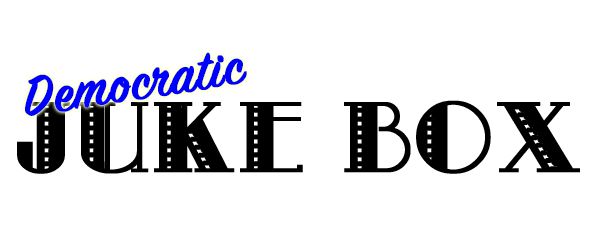
<style>
.page{position:relative;width:600px;height:250px;background:#ffffff}
.page>*{position:absolute;margin:0}
.t1{font:60px "SignPainter-HouseScript";color:#0000ff;font-weight:bold}
.t2{font:96.4px "MetroRetroNF";color:#000000;font-weight:bold}
</style>
<div class="page">
<p class="t1" style="left:25px;top:52px;width:222px;height:64px;rotate:-9deg">Democratic</p>
<p class="t2" style="left:17px;top:100px;width:563px;height:74px">Juke Box</p>
</div>
